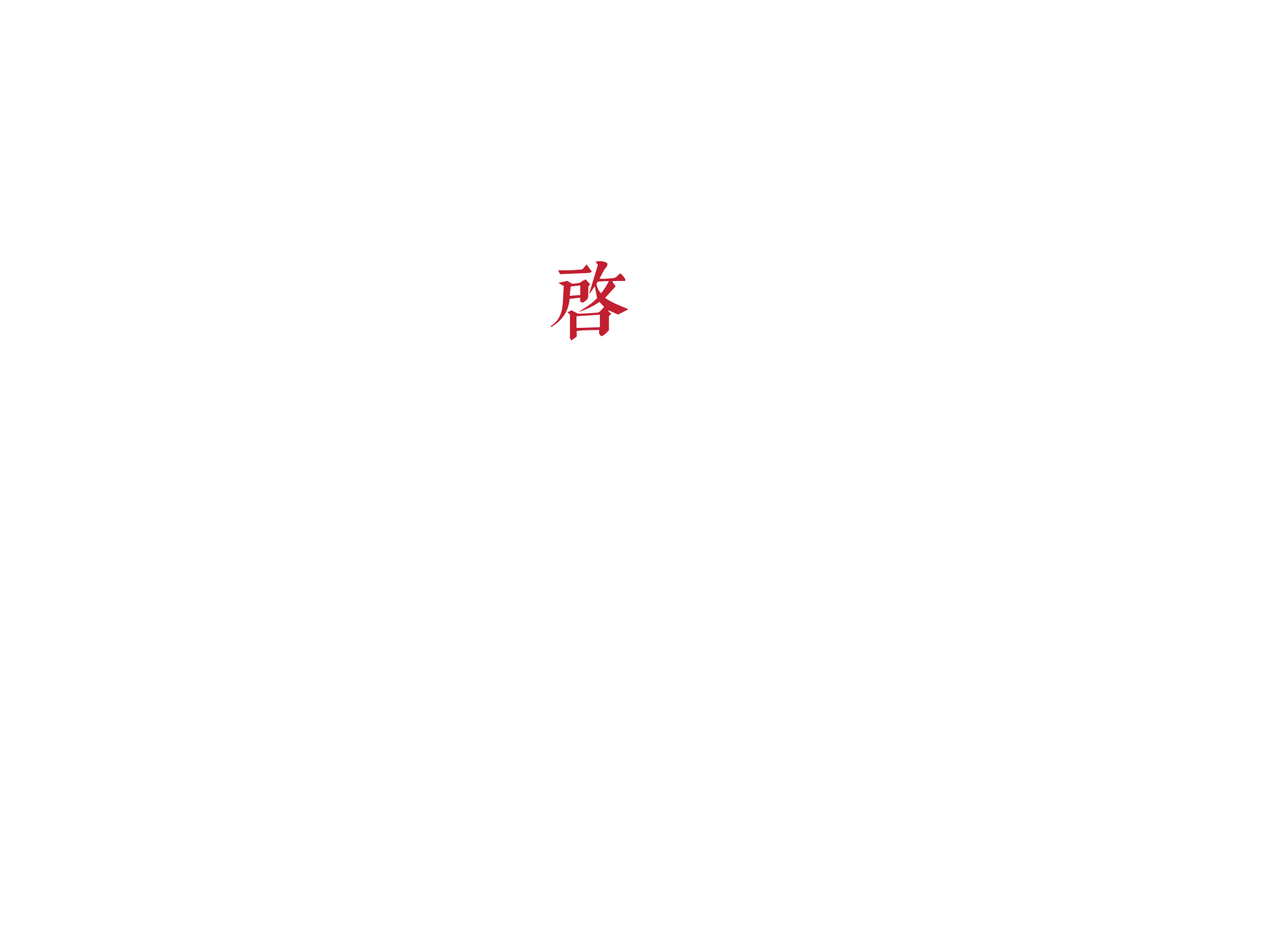
<style>
.page{position:relative;width:1261px;height:946px;background:#ffffff}
.page>*{position:absolute;margin:0}
.t1{font:83.4px "WenYue-GuDianMingChaoTi-NC-W5";color:#c21f30}
</style>
<div class="page">
<p class="t1" style="left:550px;top:261px;width:79px;height:79px">启</p>
</div>
